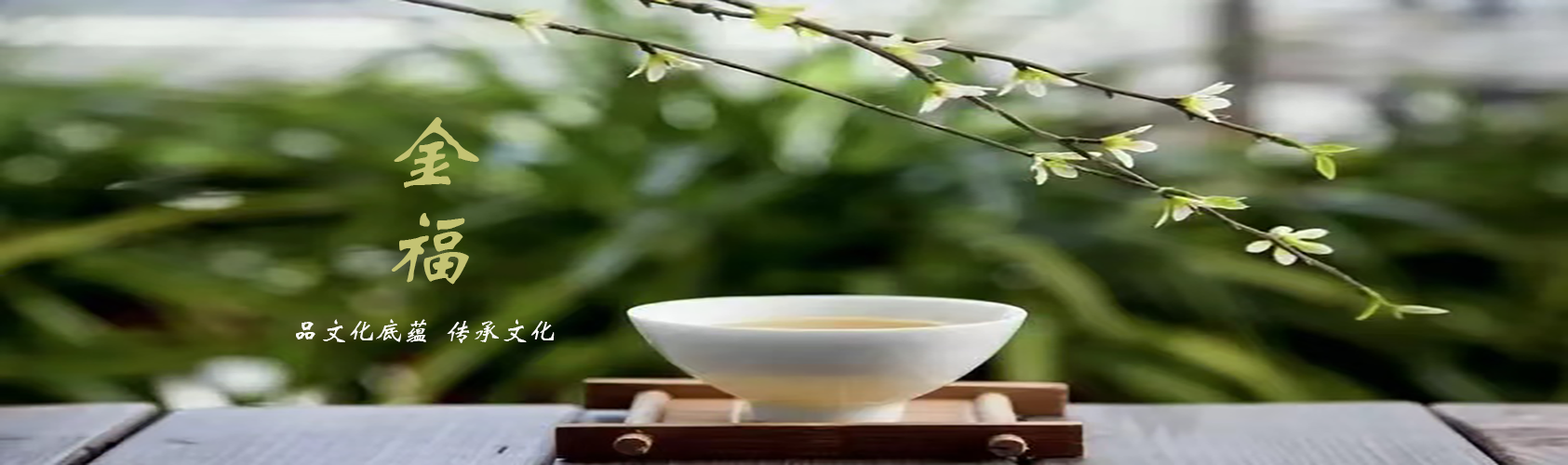
<style>
.page{position:relative;width:1568px;height:465px}
.page>*{position:absolute;margin:0}
.t1{font:93.1px/74.4px "STXinwei";color:#c4c373;font-style:italic}
.t2{font:27.9px "STXinwei";color:#fafaf5;font-style:italic}
</style>
<div class="page">
<p class="t1" style="left:391px;top:117px;width:88px;height:168px">金福</p>
<p class="t2" style="left:296px;top:319px;width:259px;height:24px">品文化底蕴  传承文化</p>
</div>
